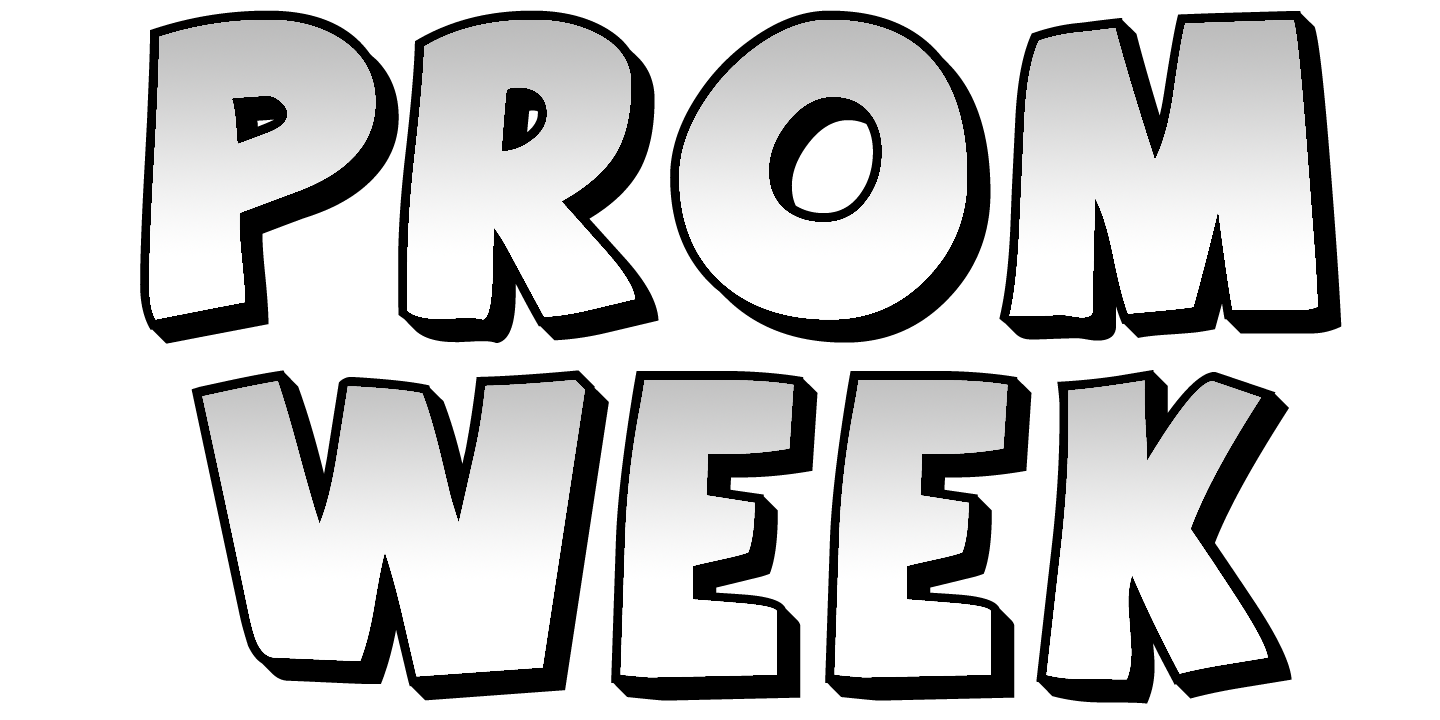
<style>
.page{position:relative;width:1440px;height:720px;background:#ffffff}
.page>*{position:absolute;margin:0}
.t1{font:300px "AgentOrange";color:#000000}
</style>
<div class="page">
<p class="t1" style="left:140px;top:10px;width:1202px;height:694px;text-align:center">Prom<br>WEEK</p>
</div>
